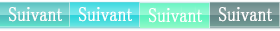
<style>
.page{position:relative;width:280px;height:31px}
.page>*{position:absolute;margin:0}
.t1{font:20.3px "MS-PMincho";color:#ffffff;font-weight:bold;scale:0.84 1}
</style>
<div class="page">
<p class="t1" style="left:9px;top:7px;width:53px;height:15px">Suivant</p>
<p class="t1" style="left:79px;top:7px;width:53px;height:15px">Suivant</p>
<p class="t1" style="left:149px;top:8px;width:53px;height:15px">Suivant</p>
<p class="t1" style="left:219px;top:7px;width:53px;height:15px">Suivant</p>
</div>
